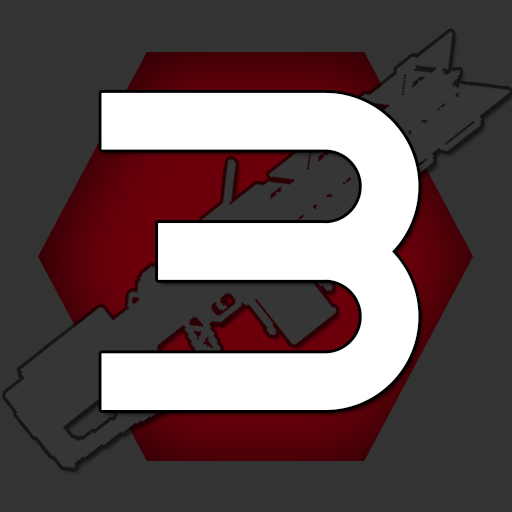
<style>
.page{position:relative;width:512px;height:512px;background:#333333}
.page>*{position:absolute;margin:0}
.t1{font:226.5px "AzonixRegular";color:#ffffff}
</style>
<div class="page">
<p class="t1" style="left:101px;top:92px;width:318px;height:318px">3</p>
</div>
